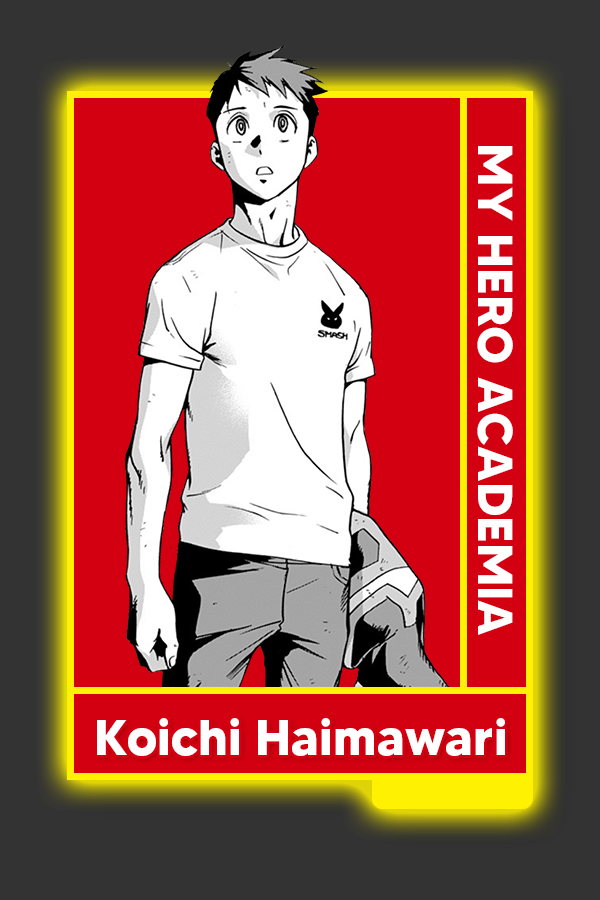
<style>
.page{position:relative;width:600px;height:900px;background:#d20010}
.page>*{position:absolute;margin:0}
.t1{font:48.8px "MADETOMMY-Bold";color:#ffffff}
.t2{font:50.5px "MADETOMMY-Bold";color:#ffffff}
</style>
<div class="page">
<p class="t1" style="left:477px;top:146px;width:36px;height:489px;rotate:90deg">MY HERO ACADEMIA</p>
<p class="t2" style="left:97px;top:718px;width:408px;height:38px">Koichi Haimawari</p>
</div>
